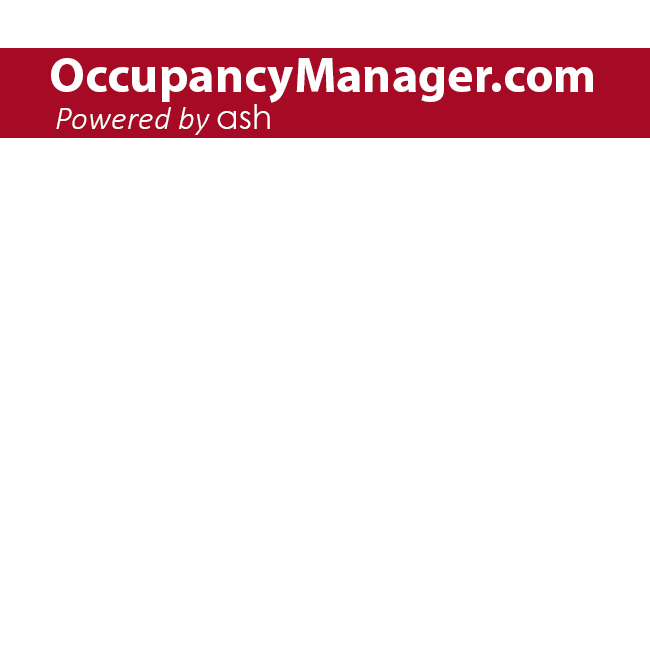
<style>
.page{position:relative;width:650px;height:650px;background:#ffffff}
.page>*{position:absolute;margin:0}
.t1{font:50px "MyriadPro-Bold";color:#fefefe}
.t2{font:33.3px "Calibri-LightItalic";color:#fefefe}
.t3{font:33.3px "CenturyGothic";color:#fefefe}
</style>
<div class="page">
<p class="t1" style="left:51px;top:58px;width:542px;height:45px">OccupancyManager.com</p>
<p class="t2" style="left:56px;top:104px;width:214px;height:31px">Powered by <span class="t3">ash</span></p>
</div>
